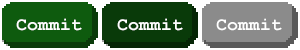
<style>
.page{position:relative;width:300px;height:50px;background:#093a09}
.page>*{position:absolute;margin:0}
.t1{font:18.3px "CourierNewPS-BoldMT";color:#ffffff}
</style>
<div class="page">
<p class="t1" style="left:16px;top:18px;width:66px;height:13px">Commit</p>
<p class="t1" style="left:117px;top:18px;width:66px;height:13px">Commit</p>
<p class="t1" style="left:216px;top:18px;width:66px;height:13px">Commit</p>
</div>
